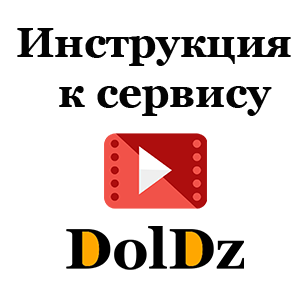
<style>
.page{position:relative;width:300px;height:300px;background:#ffffff}
.page>*{position:absolute;margin:0}
.t1{font:41.7px "Georgia-Bold";color:#030303}
</style>
<div class="page">
<p class="t1" style="left:17px;top:28px;width:274px;height:88px">Инструкция<br>    к сервису</p>
</div>
